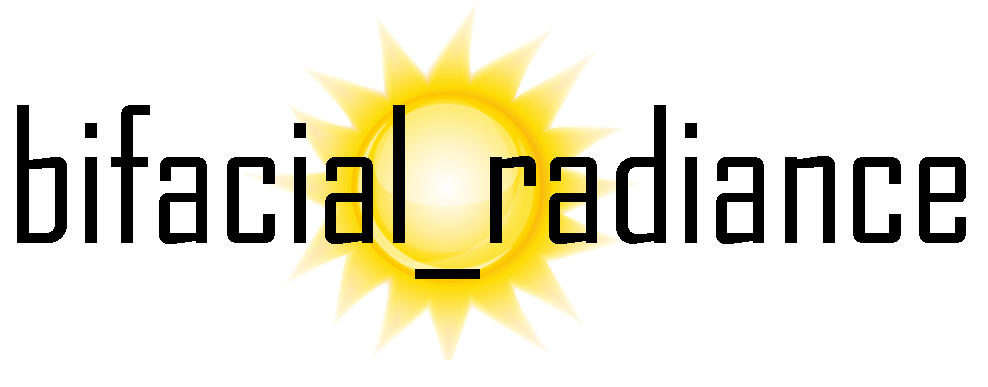
<style>
.page{position:relative;width:988px;height:387px;background:#ffffff}
.page>*{position:absolute;margin:0}
.t1{font:180.2px "AgencyFB-Reg";color:#000000}
</style>
<div class="page">
<p class="t1" style="left:17px;top:105px;width:949px;height:174px">bifacial_radiance</p>
</div>
